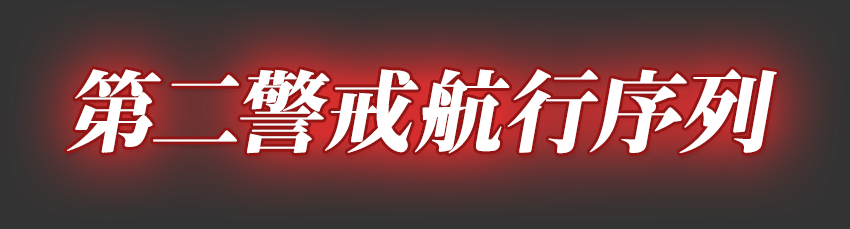
<style>
.page{position:relative;width:850px;height:229px}
.page>*{position:absolute;margin:0}
.t1{font:89px "KochoStd-Heavy";letter-spacing:0.015em;color:#ffffff;font-weight:bold;font-style:italic}
</style>
<div class="page">
<p class="t1" style="left:67px;top:69px;width:710px;height:85px">第二警戒航行序列</p>
</div>
